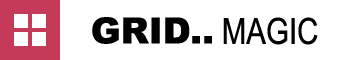
<style>
.page{position:relative;width:360px;height:60px;background:#ffffff}
.page>*{position:absolute;margin:0}
.t1{font:36px "Arial-Black";color:#000000}
.t2{font:36px "ArialNarrow";color:#000000}
</style>
<div class="page">
<p class="t1" style="left:92px;top:17px;width:120px;height:27px">GRID..</p>
<p class="t2" style="left:223px;top:17px;width:95px;height:28px">MAGIC</p>
</div>
